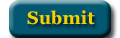
<style>
.page{position:relative;width:120px;height:38px;background:#035871}
.page>*{position:absolute;margin:0}
.t1{font:18px "Georgia-Bold";color:#f3cf08}
</style>
<div class="page">
<p class="t1" style="left:27px;top:10px;width:68px;height:15px">Submit</p>
</div>
